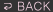
<style>
.page{position:relative;width:53px;height:12px;background:#333333}
.page>*{position:absolute;margin:0}
.t1{font:12px "Helvetica-Light";letter-spacing:0.025em;color:#fbd7e7}
</style>
<div class="page">
<p class="t1" style="left:18px;top:1px;width:33px;height:10px">BACK</p>
</div>
